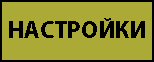
<style>
.page{position:relative;width:154px;height:62px;background:#abaa37}
.page>*{position:absolute;margin:0}
.t1{font:24px "MyriadPro-Bold";color:#000000}
</style>
<div class="page">
<p class="t1" style="left:9px;top:18px;width:136px;height:20px">НАСТРОЙКИ</p>
</div>
